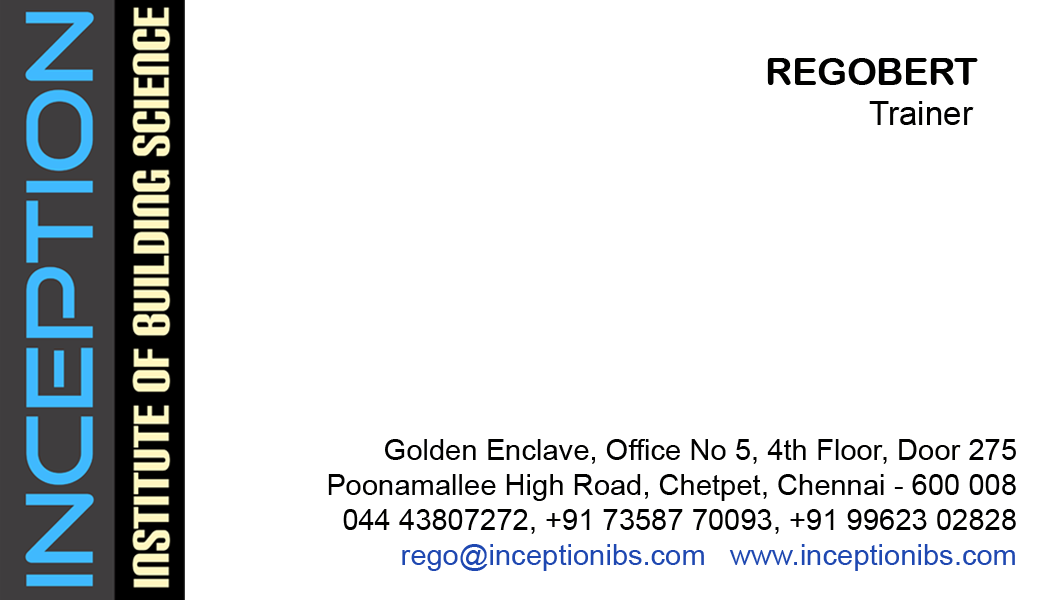
<style>
.page{position:relative;width:1050px;height:600px;background:#ffffff}
.page>*{position:absolute;margin:0}
.t1{font:37.5px "ArialRoundedMTBold";color:#010100}
.t2{font:33.3px "ArialMT";color:#010100}
.t3{font:29.2px "ArialMT";color:#010100}
.t4{font:29.2px "ArialMT";color:#1f48b1}
</style>
<div class="page">
<p class="t1" style="left:767px;top:58px;width:211px;height:27px">REGOBERT</p>
<p class="t2" style="left:869px;top:101px;width:105px;height:24px">Trainer</p>
<p class="t3" style="left:328px;top:439px;width:688px;height:132px;text-align:right">Golden Enclave, Office No 5, 4th Floor, Door 275<br>Poonamallee High Road, Chetpet, Chennai - 600 008<br>044 43807272, +91 73587 70093, +91 99623 02828<br><span class="t4">rego@inceptionibs.com   www.inceptionibs.com</span></p>
</div>
